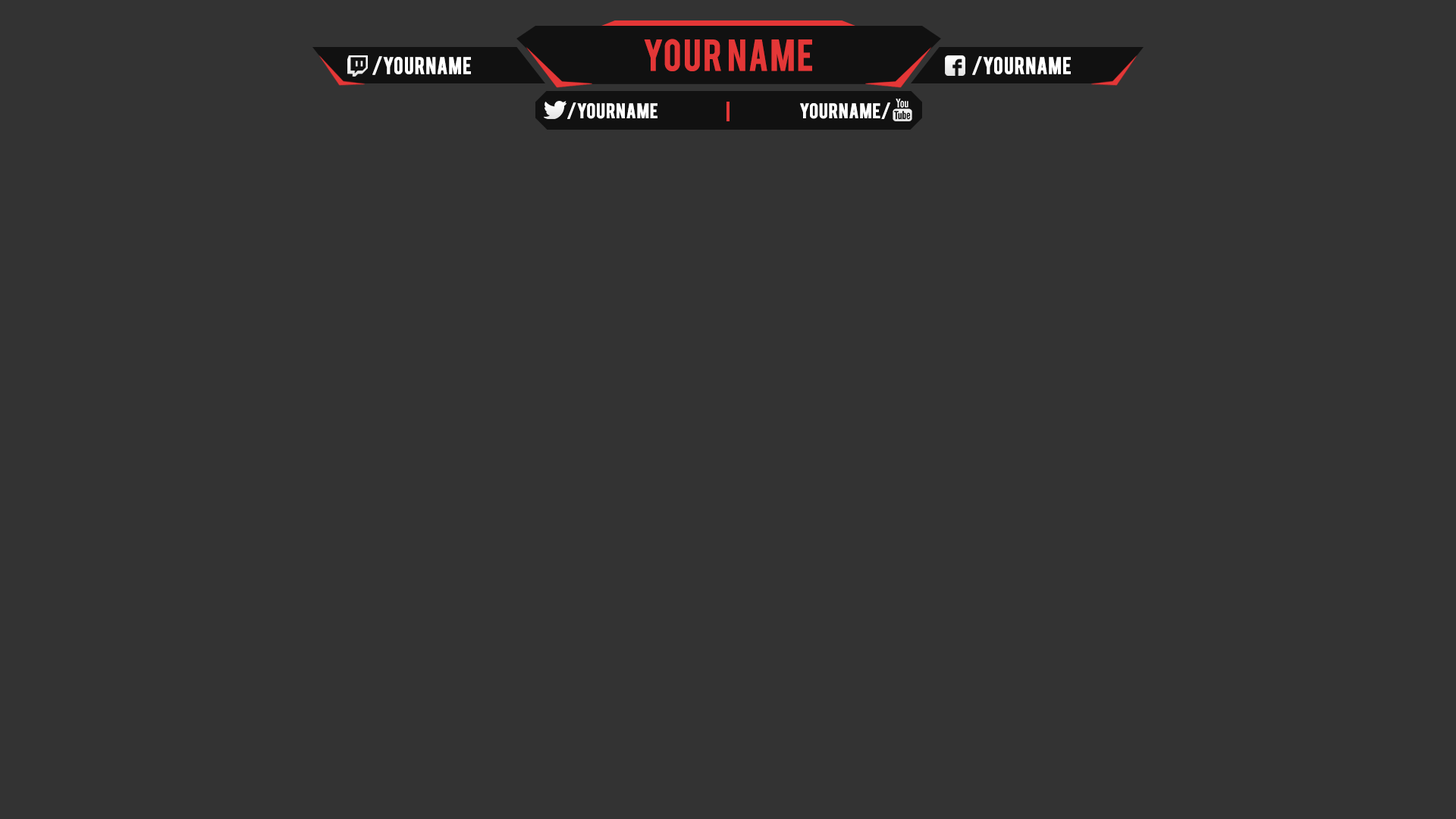
<style>
.page{position:relative;width:1456px;height:819px;background:#333333}
.page>*{position:absolute;margin:0}
.t1{font:34.9px "Bebas";color:#e43737;font-weight:bold}
.t2{font:18.7px "Bebas";color:#ffffff;font-weight:bold}
.t3{font:16.6px "Bebas";color:#ffffff;font-weight:bold}
</style>
<div class="page">
<p class="t1" style="left:644px;top:39px;width:168px;height:32px">YOUR NAME</p>
<p class="t2" style="left:372px;top:56px;width:99px;height:19px">/yourname</p>
<p class="t2" style="left:972px;top:56px;width:99px;height:19px">/yourname</p>
<p class="t3" style="left:567px;top:102px;width:90px;height:17px">/YOURNAME</p>
<p class="t3" style="left:800px;top:102px;width:90px;height:17px">YOURNAME/</p>
</div>
